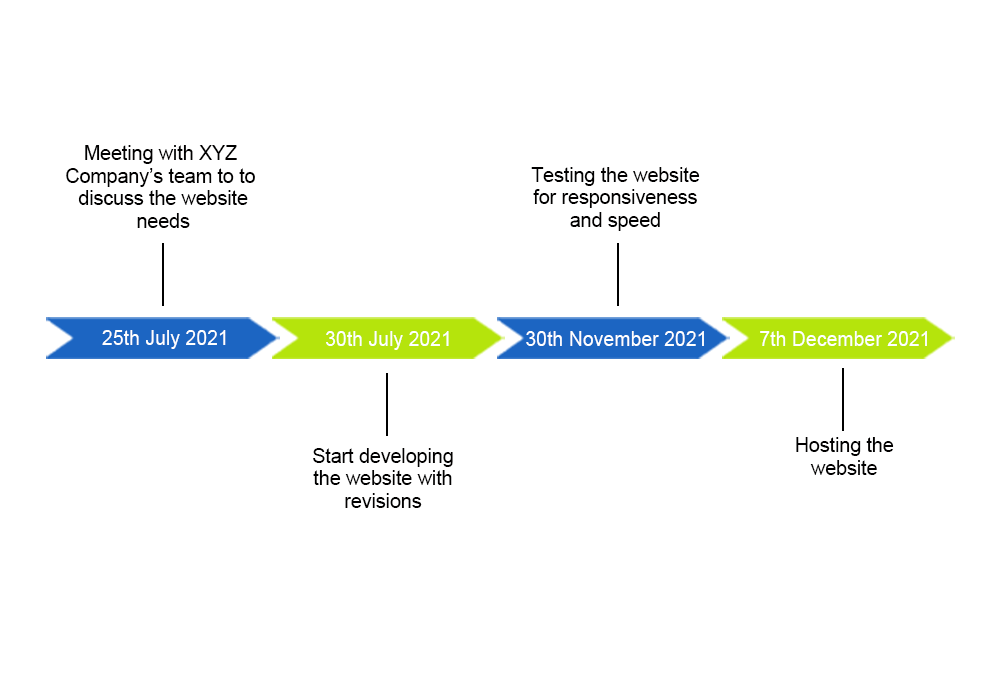
<style>
.page{position:relative;width:1000px;height:676px;background:#ffffff}
.page>*{position:absolute;margin:0}
.t1{font:19.6px/22.5px "ArialMT";color:#010000}
.t2{font:19.5px "ArialMT";color:#ffffff}
</style>
<div class="page">
<p class="t1" style="left:66px;top:145px;width:189px;height:83px;text-align:center">Meeting with XYZ <br>Company’s team to to <br>discuss the website<br>needs</p>
<p class="t1" style="left:531px;top:167px;width:169px;height:64px;text-align:center">Testing the website<br>for responsiveness<br>and speed</p>
<p class="t2" style="left:102px;top:330px;width:124px;height:19px">25th July 2021</p>
<p class="t2" style="left:326px;top:331px;width:123px;height:19px">30th July 2021</p>
<p class="t2" style="left:526px;top:331px;width:178px;height:15px">30th November 2021</p>
<p class="t2" style="left:760px;top:331px;width:167px;height:15px">7th December 2021</p>
<p class="t1" style="left:796px;top:437px;width:98px;height:38px;text-align:center">Hosting the<br>website</p>
<p class="t1" style="left:313px;top:448px;width:140px;height:60px;text-align:center">Start developing<br>the website with<br>revisions</p>
</div>
